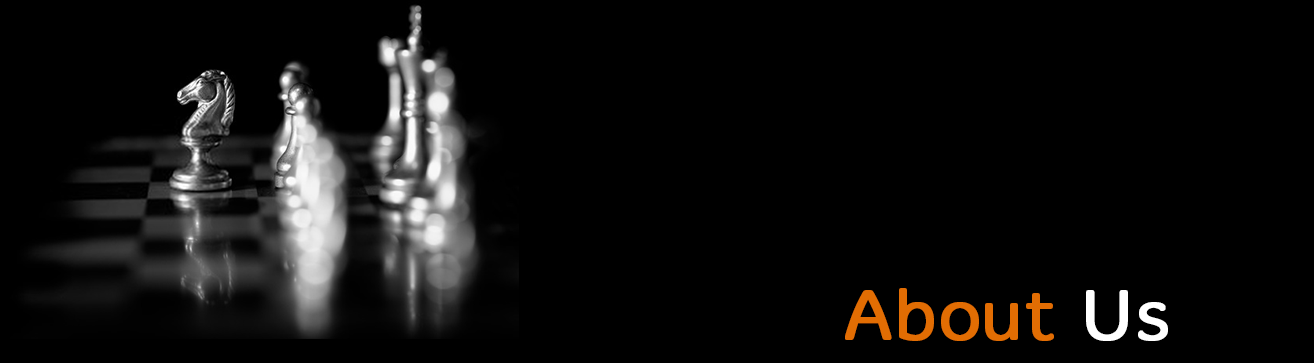
<style>
.page{position:relative;width:1314px;height:363px;background:#000000}
.page>*{position:absolute;margin:0}
.t1{font:72.9px "Merge-Light";color:#e26d03;font-weight:bold}
.t2{font:72.9px "Merge-Light";color:#ffffff;font-weight:bold}
</style>
<div class="page">
<p class="t1" style="left:845px;top:288px;width:323px;height:53px">About <span class="t2">Us</span></p>
</div>
